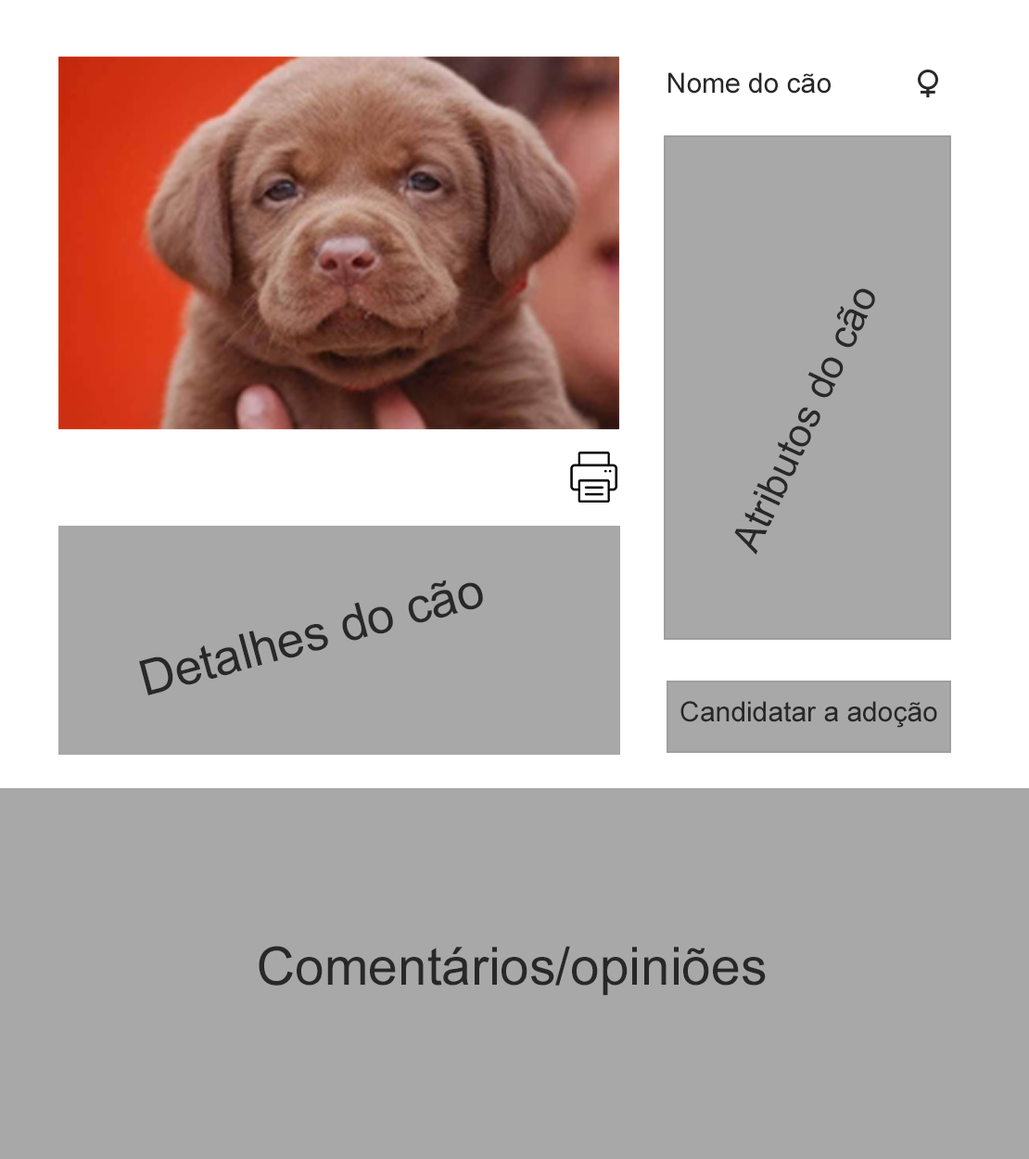
<style>
.page{position:relative;width:1029px;height:1159px;background:#a8a8a8}
.page>*{position:absolute;margin:0}
.t1{font:27.8px "ArialMT";color:#282828}
.t2{font:40px "ArialMT";color:#282828}
.t3{font:49.1px "ArialMT";color:#282828}
.t4{font:52.7px "ArialMT";color:#282828}
</style>
<div class="page">
<p class="t1" style="left:668px;top:72px;width:163px;height:22px">Nome do cão</p>
<p class="t2" style="left:734px;top:288px;width:141px;height:266px;rotate:-65deg">Atributos do cão</p>
<p class="t3" style="left:139px;top:579px;width:344px;height:116px;rotate:-15deg">Detalhes do cão</p>
<p class="t1" style="left:680px;top:701px;width:257px;height:27px">Candidatar a adoção</p>
<p class="t4" style="left:259px;top:946px;width:507px;height:50px">Comentários/opiniões</p>
</div>
